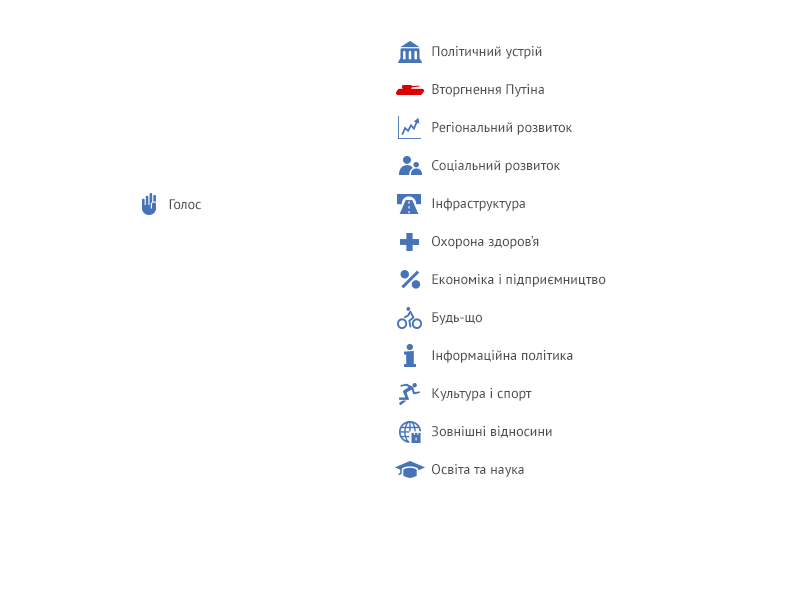
<style>
.page{position:relative;width:800px;height:600px;background:#ffffff}
.page>*{position:absolute;margin:0}
.t1{font:14px/38px "PTSans-Regular";color:#4f4f4f}
.t2{font:14px "PTSans-Regular";color:#4f4f4f}
</style>
<div class="page">
<p class="t1" style="left:431px;top:46px;width:175px;height:431px">Політичний устрій<br>Вторгнення Путіна<br>Регіональний розвиток<br>Соціальний розвиток<br>Інфраструктура<br>Охорона здоров’я<br>Економіка і підприємництво<br>Будь-що<br>Інформаційна політика<br>Культура і спорт<br>Зовнішні відносини<br>Освіта та наука</p>
<p class="t2" style="left:169px;top:199px;width:32px;height:11px">Голос</p>
</div>
